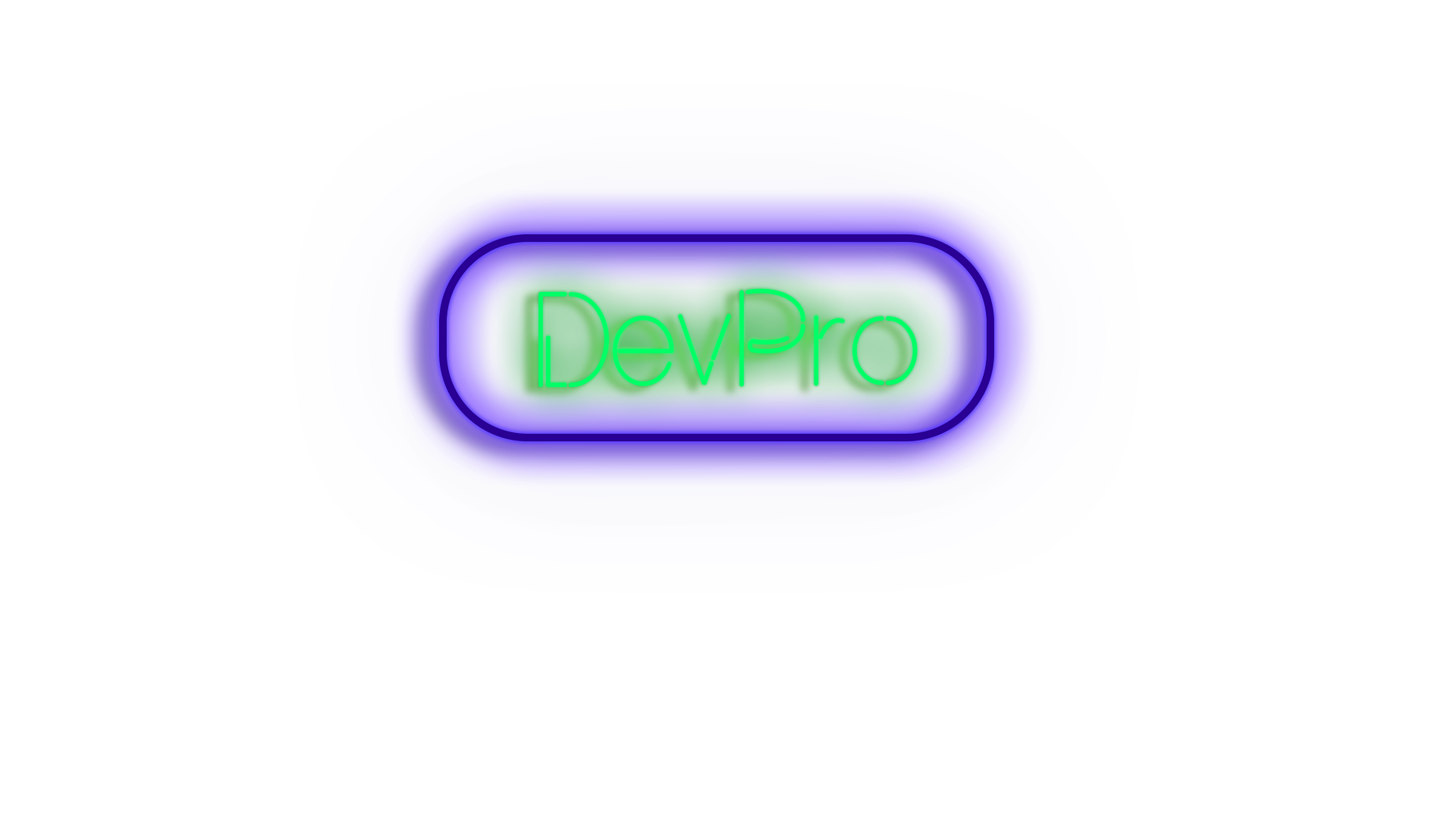
<style>
.page{position:relative;width:1456px;height:819px;background:#ffffff}
.page>*{position:absolute;margin:0}
.t1{font:113.7px "NEONABSOLUTESANS1Regular";color:#00ff66}
</style>
<div class="page">
<p class="t1" style="left:538px;top:288px;width:380px;height:100px">DevPro</p>
</div>
